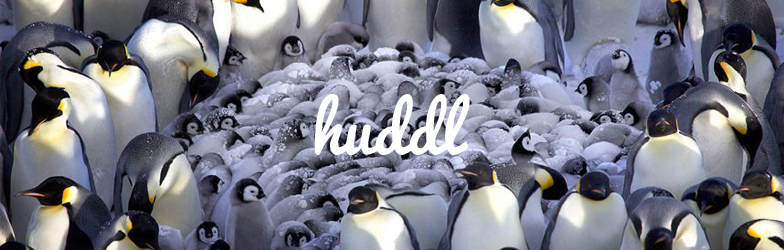
<style>
.page{position:relative;width:784px;height:250px}
.page>*{position:absolute;margin:0}
.t1{font:65px "Pacifico-Regular";color:#ffffff}
</style>
<div class="page">
<p class="t1" style="left:314px;top:94px;width:156px;height:61px">huddl</p>
</div>
